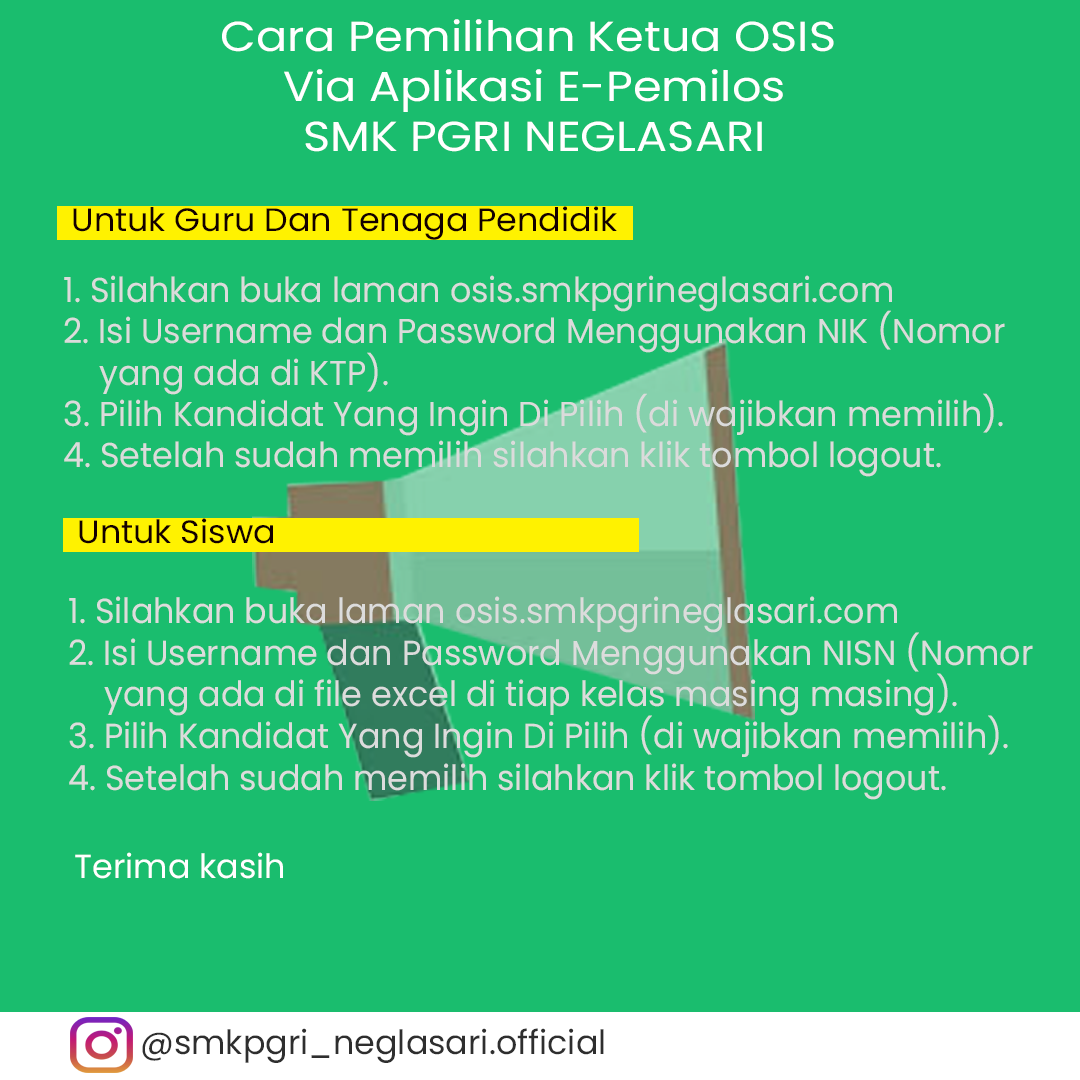
<style>
.page{position:relative;width:1080px;height:1080px;background:#1abd6e}
.page>*{position:absolute;margin:0}
.t1{font:41.9px "Poppins-Regular";color:#ffffff;scale:1.1 1}
.t2{font:32.4px "Poppins-Regular";color:#140000;scale:1.03 1}
.t3{font:34.5px "Poppins-Regular";color:#dbdbdb;scale:0.97 1}
.t4{font:32.2px "Poppins-Regular";color:#140000;scale:1.03 1}
.t5{font:34.7px "Poppins-Regular";color:#dcdcdc;scale:0.96 1}
.t6{font:34.7px "Poppins-Regular";color:#140000;scale:0.96 1}
.t7{font:33.3px "Poppins-Regular";color:#ffffff}
.t8{font:33.3px "Poppins-Regular";color:#2e2e2e}
</style>
<div class="page">
<p class="t1" style="left:222px;top:19px;width:612px;height:133px;text-align:center">Cara Pemilihan Ketua OSIS <br>Via Aplikasi E-Pemilos<br>SMK PGRI NEGLASARI</p>
<p class="t2" style="left:73px;top:206px;width:544px;height:34px">Untuk Guru Dan Tenaga Pendidik</p>
<p class="t3" style="left:64px;top:275px;width:941px;height:202px">1. Silahkan buka laman osis.smkpgrineglasari.com<br>2. Isi Username dan Password Menggunakan NIK (Nomor <br> yang ada di KTP).<br>3. Pilih Kandidat Yang Ingin Di Pilih (di wajibkan memilih).<br>4. Setelah sudah memilih silahkan klik tombol logout.</p>
<p class="t4" style="left:79px;top:518px;width:194px;height:26px">Untuk Siswa</p>
<p class="t5" style="left:69px;top:596px;width:964px;height:204px"><span class="t6"><br></span>1. Silahkan buka laman osis.smkpgrineglasari.com<br>2. Isi Username dan Password Menggunakan NISN (Nomor <br> yang ada di file excel di tiap kelas masing masing).<br>3. Pilih Kandidat Yang Ingin Di Pilih (di wajibkan memilih).<br>4. Setelah sudah memilih silahkan klik tombol logout.</p>
<p class="t7" style="left:75px;top:852px;width:208px;height:27px">Terima kasih</p>
<p class="t8" style="left:142px;top:1028px;width:462px;height:35px">@smkpgri_neglasari.official</p>
</div>
